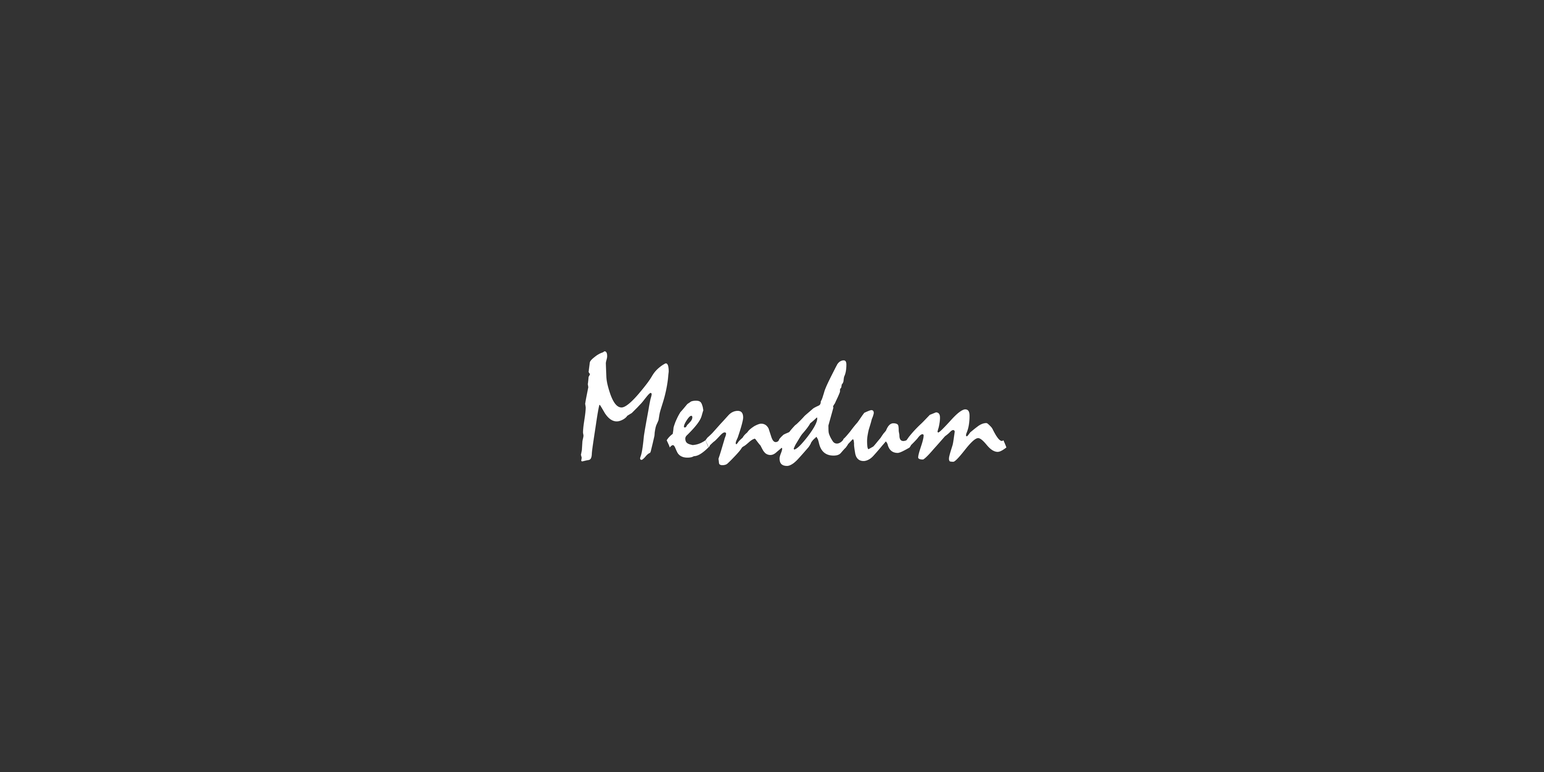
<style>
.page{position:relative;width:1544px;height:772px;background:#333333}
.page>*{position:absolute;margin:0}
.t1{font:157.1px "Mistral";color:#ffffff}
</style>
<div class="page">
<p class="t1" style="left:581px;top:351px;width:426px;height:115px">Mendum</p>
</div>
